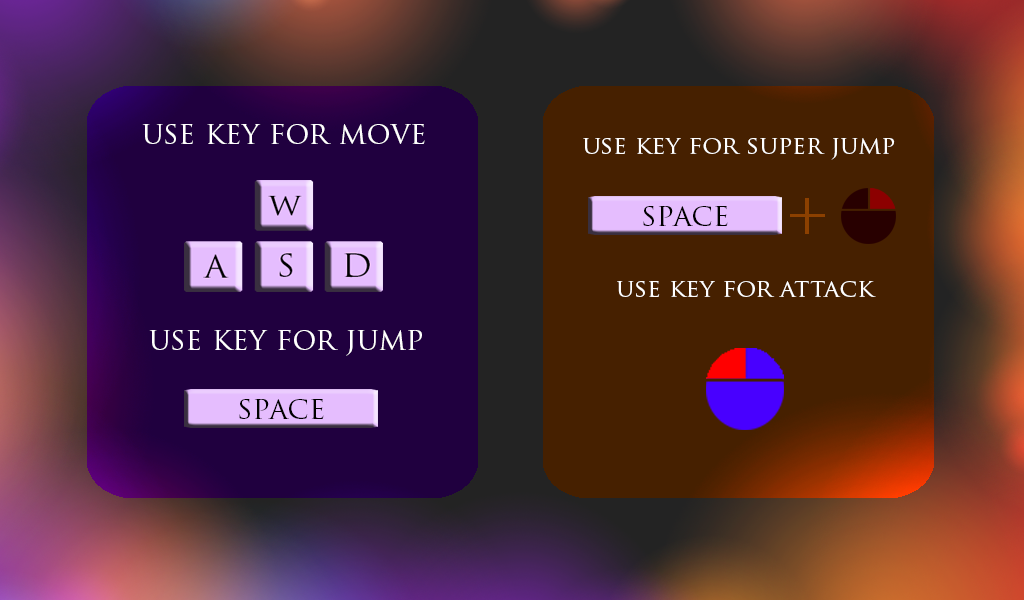
<style>
.page{position:relative;width:1024px;height:600px}
.page>*{position:absolute;margin:0}
.t1{font:30px "TrajanPro-Regular";color:#ffffff}
.t2{font:25px "TrajanPro-Regular";color:#ffffff}
</style>
<div class="page">
<p class="t1" style="left:142px;top:124px;width:283px;height:20px">use key for move</p>
<p class="t2" style="left:583px;top:138px;width:312px;height:22px">use key for super jump</p>
<p class="t2" style="left:617px;top:281px;width:259px;height:16px">use key for attack</p>
<p class="t1" style="left:149px;top:330px;width:273px;height:26px">use key for jump</p>
</div>
